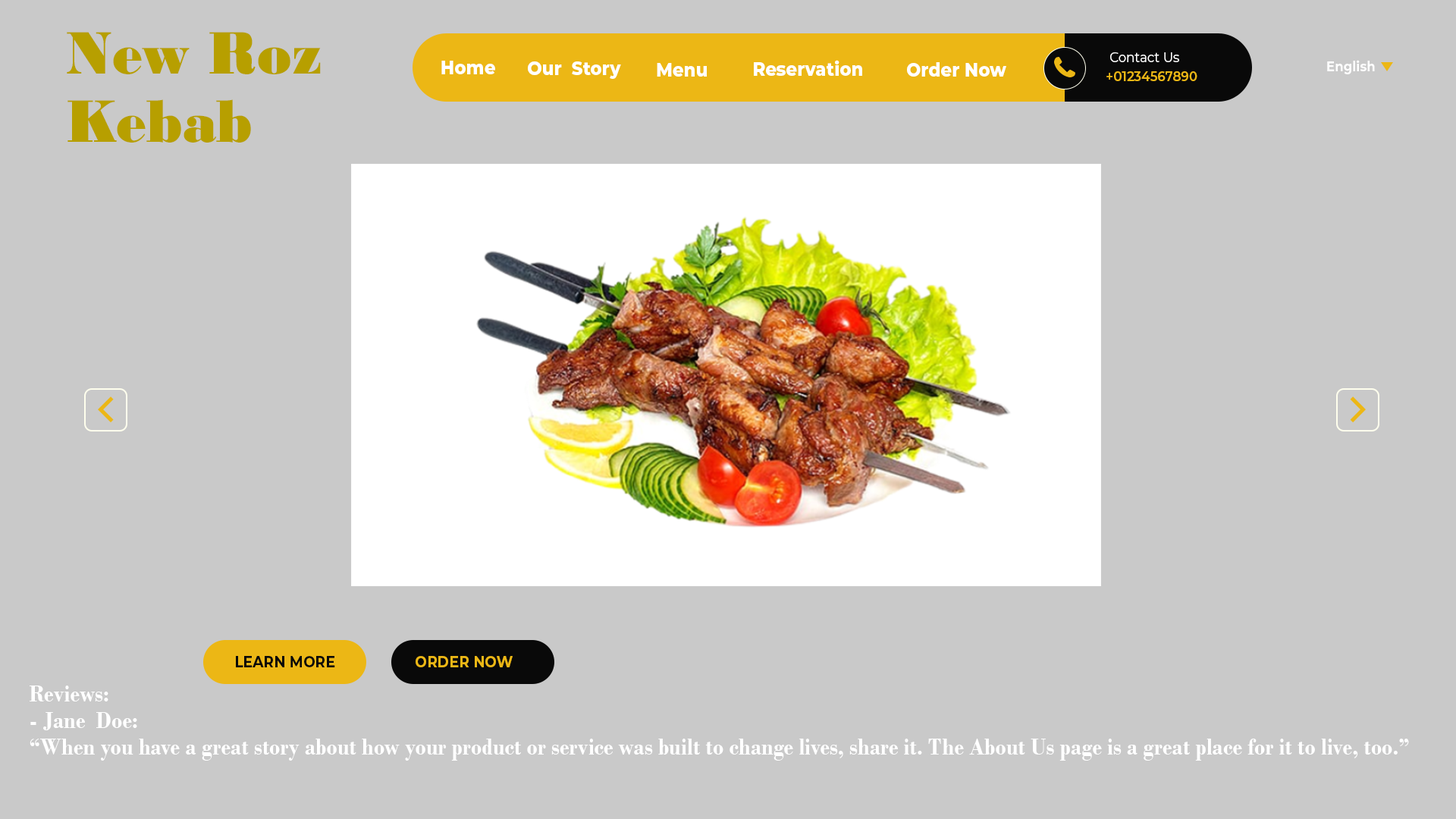
<style>
.page{position:relative;width:1456px;height:819px;background:#c9c9c9}
.page>*{position:absolute;margin:0}
.t1{font:63.1px "BodoniMTBlack";color:#b79f00;scale:0.9 1}
.t2{font:14px "Montserrat-Regular";color:#ffffff;scale:0.9 1}
.t3{font:19.3px "Montserrat-ExtraBold";color:#ffffff;scale:0.9 1}
.t4{font:14px "Montserrat-Bold";color:#ffffff;scale:0.9 1}
.t5{font:14px "Montserrat-SemiBold";color:#ecb715;scale:0.9 1}
.t6{font:15.8px "Montserrat-Bold";color:#090909;scale:0.9 1}
.t7{font:15.8px "Montserrat-Bold";color:#ecb715;scale:0.9 1}
.t8{font:24.6px "BodoniMT-Bold";color:#ffffff;scale:0.9 1}
</style>
<div class="page">
<p class="t1" style="left:67px;top:32px;width:254px;height:111px">New Roz<br>Kebab</p>
<p class="t2" style="left:1110px;top:52px;width:69px;height:10px">Contact Us</p>
<p class="t3" style="left:441px;top:61px;width:54px;height:13px">Home</p>
<p class="t3" style="left:528px;top:61px;width:93px;height:18px">Our  Story</p>
<p class="t3" style="left:657px;top:63px;width:50px;height:14px">Menu</p>
<p class="t3" style="left:754px;top:60px;width:108px;height:16px">Reservation</p>
<p class="t3" style="left:907px;top:62px;width:99px;height:15px">Order Now</p>
<p class="t4" style="left:1327px;top:60px;width:48px;height:14px">English</p>
<p class="t5" style="left:1106px;top:71px;width:91px;height:10px">+01234567890</p>
<p class="t6" style="left:236px;top:656px;width:99px;height:11px">LEARN MORE</p>
<p class="t7" style="left:416px;top:656px;width:97px;height:11px">ORDER NOW</p>
<p class="t8" style="left:30px;top:686px;width:1379px;height:75px">Reviews:<br>- Jane  Doe​:<br>“When you have a great story about how your product or service was built to change lives, share it. The About Us page is a great place for it to live, too.”</p>
</div>
